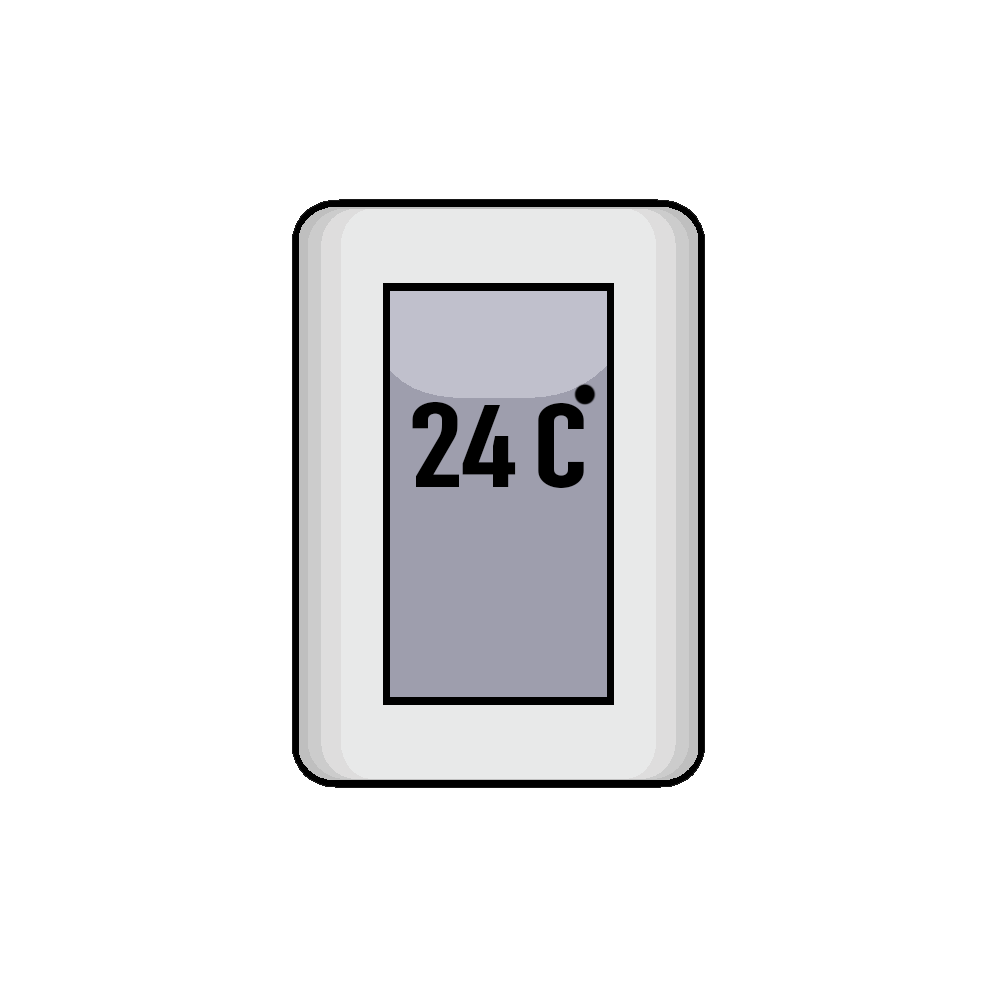
<style>
.page{position:relative;width:1000px;height:1000px;background:#ffffff}
.page>*{position:absolute;margin:0}
.t1{font:164px "EzerSusita-Regular";letter-spacing:-0.02em;color:#000000}
</style>
<div class="page">
<p class="t1" style="left:412px;top:401px;width:172px;height:87px">24 c</p>
</div>
